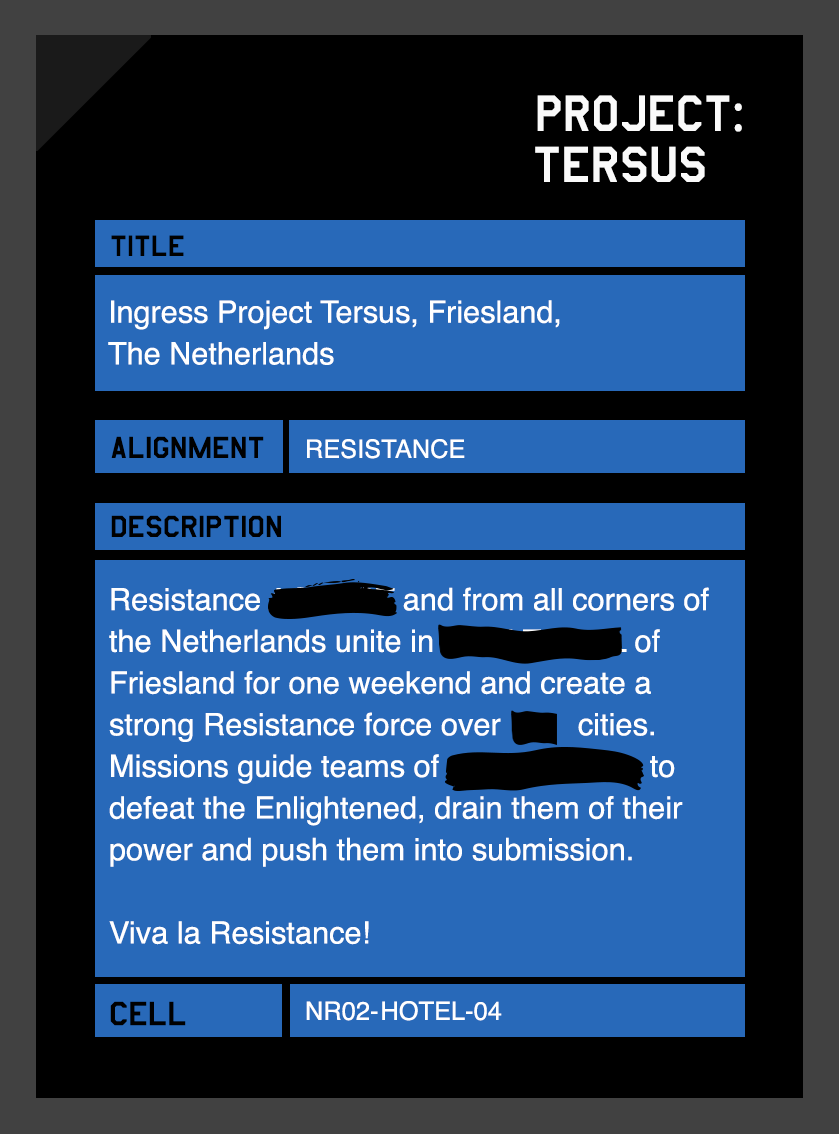
<style>
.page{position:relative;width:839px;height:1134px;background:#2869b9}
.page>*{position:absolute;margin:0}
.t1{font:58.6px "AmarilloUSAF";color:#fafafa;scale:0.96 1}
.t2{font:58.6px "MyriadPro-Regular";color:#fafafa;scale:0.96 1}
.t3{font:58.3px "AmarilloUSAF";color:#fafafa}
.t4{font:33.6px "AmarilloUSAF";color:#000000}
.t5{font:30.8px/41.7px "Helvetica";color:#ffffff}
.t6{font:34.7px "AmarilloUSAF";color:#000000}
.t7{font:25.4px "Helvetica";color:#ffffff}
.t8{font:39px "AmarilloUSAF";color:#000000}
</style>
<div class="page">
<p class="t1" style="left:537px;top:95px;width:205px;height:37px">PROJECT<span class="t2">:</span></p>
<p class="t3" style="left:535px;top:146px;width:170px;height:36px">TERSUS</p>
<p class="t4" style="left:111px;top:235px;width:73px;height:21px">TITLE</p>
<p class="t5" style="left:108px;top:300px;width:452px;height:65px">Ingress Project Tersus, Friesland, <br>The Netherlands</p>
<p class="t6" style="left:111px;top:436px;width:153px;height:22px">ALIGNment</p>
<p class="t7" style="left:307px;top:439px;width:158px;height:20px">RESISTANCE</p>
<p class="t6" style="left:111px;top:515px;width:170px;height:22px">DESCRIPTION</p>
<p class="t5" style="left:109px;top:587px;width:600px;height:358px">Resistance AGENST and from all corners of the Netherlands unite in CAPI T AL   L of Friesland for one weekend and create a strong Resistance force over   7    cities.    Missions guide teams of    AGENTS      to defeat the Enlightened, drain them of their power and push them into submission. <br><br>Viva la Resistance!</p>
<p class="t8" style="left:110px;top:1001px;width:76px;height:25px">CELL</p>
<p class="t7" style="left:306px;top:1001px;width:196px;height:20px">NR02-HOTEL-04</p>
</div>
